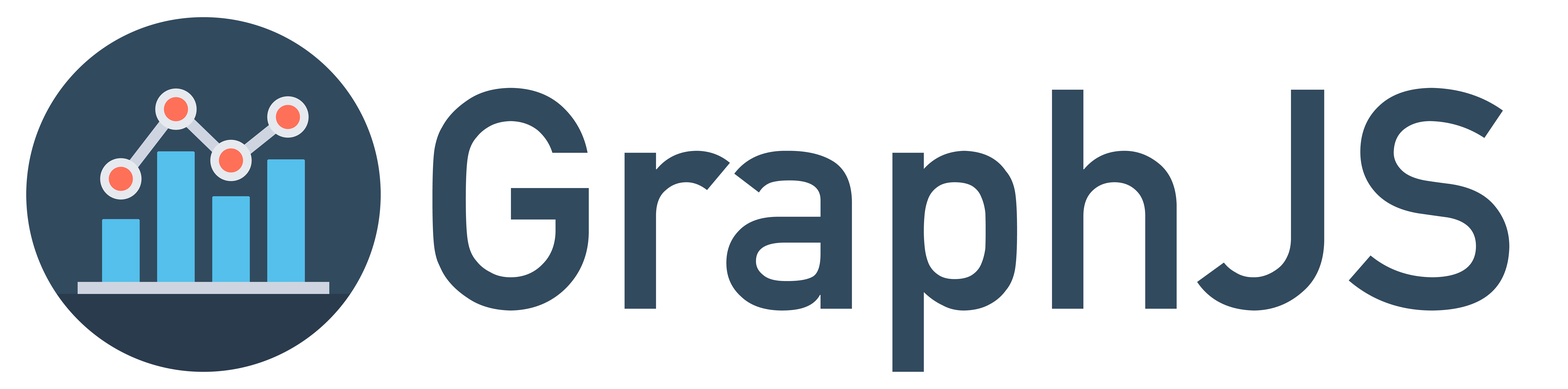
<style>
.page{position:relative;width:1568px;height:389px;background:#ffffff}
.page>*{position:absolute;margin:0}
.t1{font:307.5px "DINAlternate-Bold";color:#324a5e}
</style>
<div class="page">
<p class="t1" style="left:432px;top:88px;width:1077px;height:284px">GraphJS</p>
</div>
